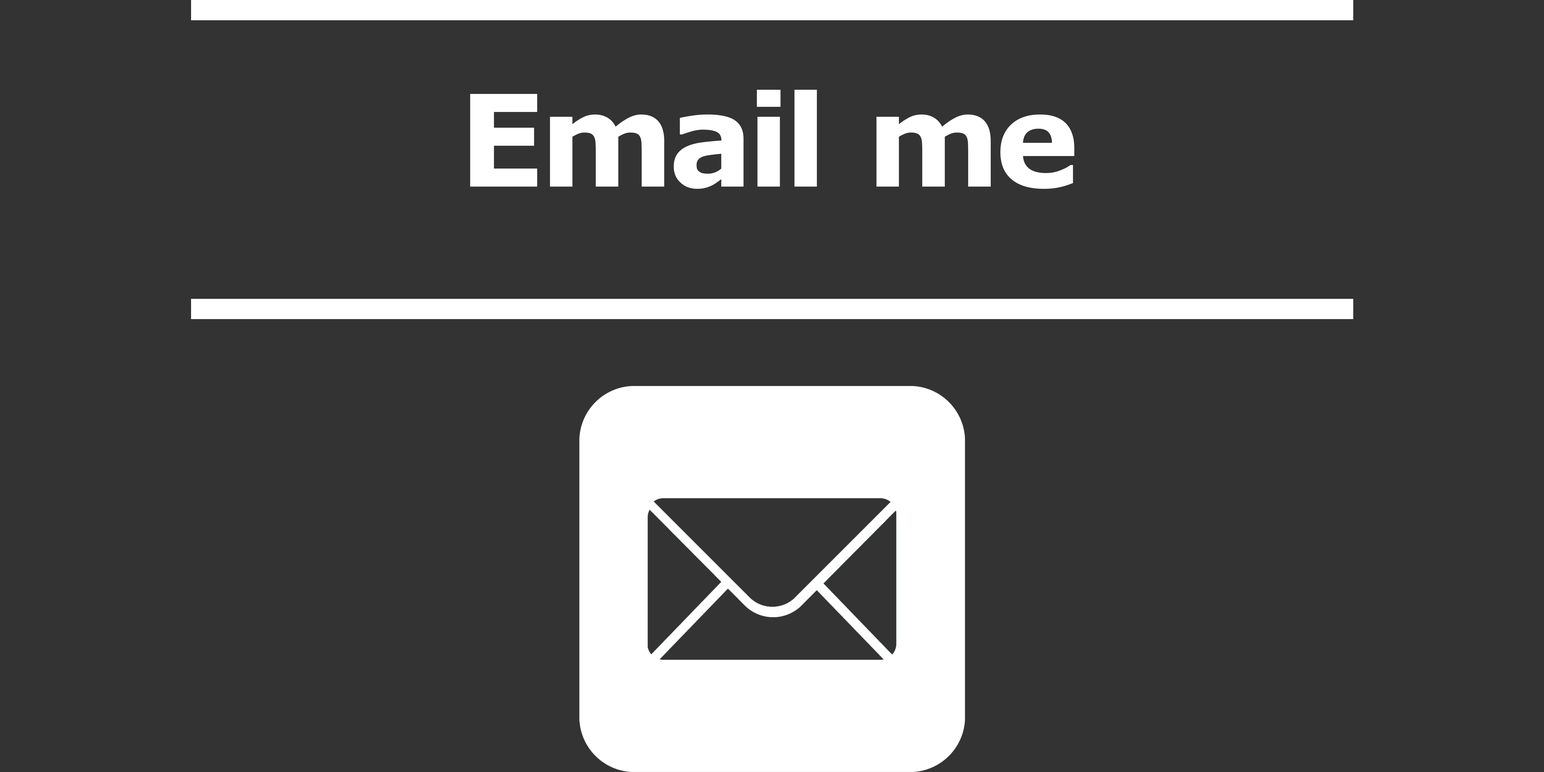
<style>
.page{position:relative;width:1544px;height:772px;background:#333333}
.page>*{position:absolute;margin:0}
.t1{font:127.4px "Verdana-Bold";letter-spacing:-0.02em;color:#ffffff}
</style>
<div class="page">
<p class="t1" style="left:470px;top:90px;width:605px;height:99px">Email me</p>
</div>
